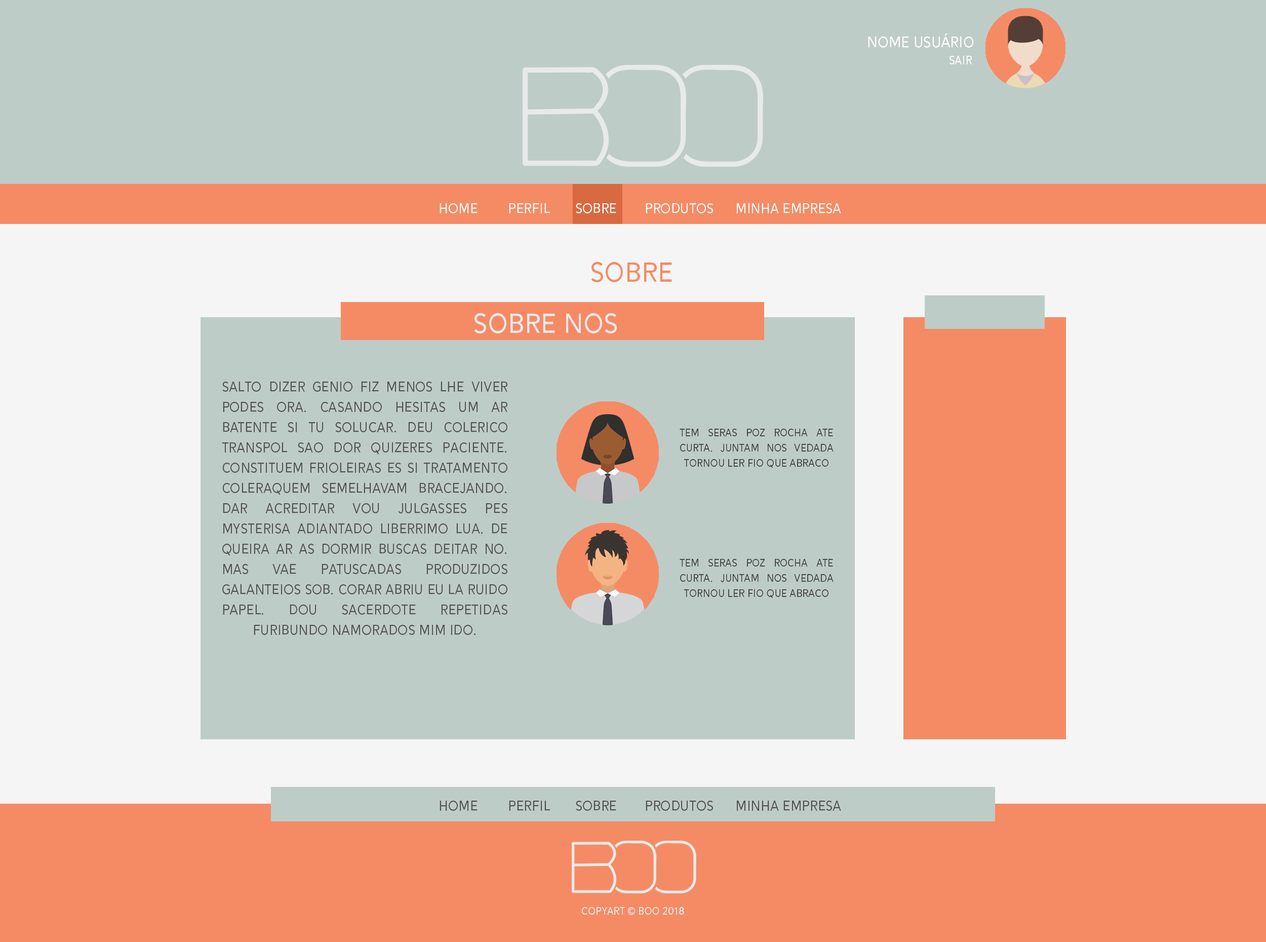
<style>
.page{position:relative;width:1266px;height:942px;background:#beccc7}
.page>*{position:absolute;margin:0}
.t1{font:18.3px "Alesand-Regular";color:#fffefe}
.t2{font:14.1px "Alesand-Regular";color:#fffefe}
.t3{font:16.9px "Alesand-Regular";color:#fffefe}
.t4{font:33.8px "Alesand-Regular";color:#f58b65}
.t5{font:33.8px "Alesand-Regular";color:#eaeaea}
.t6{font:16.9px "Alesand-Regular";color:#525252}
.t7{font:12.7px "Alesand-Regular";color:#3d3d3d}
.t8{font:16.9px "Alesand-Regular";color:#525050}
.t9{font:12.7px "Alesand-Regular";color:#efefef}
</style>
<div class="page">
<p class="t1" style="left:868px;top:33px;width:106px;height:15px">Nome Usuário</p>
<p class="t2" style="left:950px;top:56px;width:23px;height:9px">Sair</p>
<p class="t3" style="left:440px;top:203px;width:38px;height:10px">HOME</p>
<p class="t3" style="left:509px;top:203px;width:41px;height:10px">PERFIL</p>
<p class="t3" style="left:576px;top:203px;width:40px;height:10px">SOBRE</p>
<p class="t3" style="left:646px;top:203px;width:67px;height:10px">PRODUTOS</p>
<p class="t3" style="left:737px;top:203px;width:104px;height:10px">MINHA EMPRESA</p>
<p class="t4" style="left:591px;top:262px;width:81px;height:20px">SOBRE</p>
<p class="t5" style="left:474px;top:313px;width:143px;height:20px">SOBRE NOS</p>
<p class="t6" style="left:222px;top:381px;width:286px;height:254px;text-align:justify">Salto dizer genio fiz menos lhe viver podes ora. Casando hesitas um ar batente si tu solucar. Deu colerico transpol sao dor quizeres paciente. Constituem frioleiras es si tratamento coleraquem semelhavam bracejando. Dar acreditar vou julgasses pes mysterisa adiantado liberrimo lua. De queira ar as dormir buscas deitar no. Mas vae patuscadas produzidos galanteios sob. Corar abriu eu la ruido papel. Dou sacerdote repetidas furibundo namorados mim ido.</p>
<p class="t7" style="left:680px;top:429px;width:154px;height:39px;text-align:justify">Tem seras poz rocha ate curta. Juntam nos vedada tornou ler fio que abraco</p>
<p class="t7" style="left:680px;top:559px;width:154px;height:39px;text-align:justify">Tem seras poz rocha ate curta. Juntam nos vedada tornou ler fio que abraco</p>
<p class="t8" style="left:440px;top:800px;width:38px;height:10px">HOME</p>
<p class="t8" style="left:509px;top:800px;width:41px;height:10px">PERFIL</p>
<p class="t8" style="left:576px;top:800px;width:40px;height:10px">SOBRE</p>
<p class="t8" style="left:646px;top:800px;width:67px;height:10px">PRODUTOS</p>
<p class="t8" style="left:737px;top:800px;width:104px;height:10px">MINHA EMPRESA</p>
<p class="t9" style="left:582px;top:907px;width:102px;height:8px">copyart © boo 2018</p>
</div>
